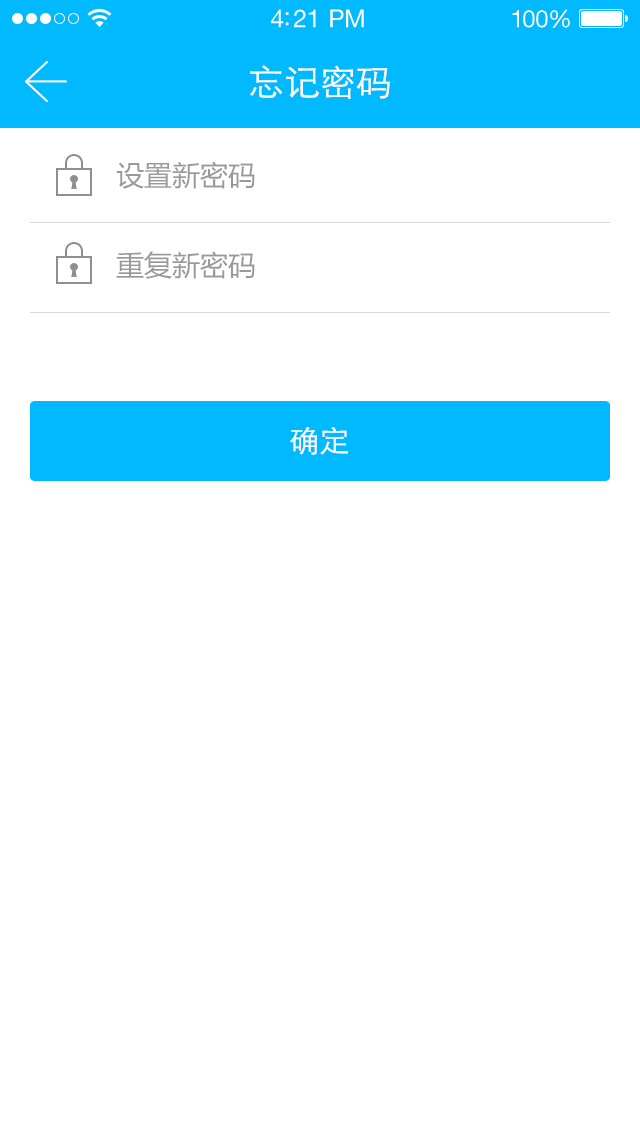
<style>
.page{position:relative;width:640px;height:1136px;background:#ffffff}
.page>*{position:absolute;margin:0}
.t1{font:25px "HelveticaNeueLTStd-Roman";letter-spacing:-0.02em;color:#ffffff}
.t2{font:24px "HelveticaNeueLTStd-Roman";letter-spacing:-0.02em;color:#ffffff}
.t3{font:36px "STXihei";color:#ffffff;text-transform:uppercase}
.t4{font:28px "MicrosoftYaHei";color:#999999}
.t5{font:30px "STXihei";color:#ffffff}
</style>
<div class="page">
<p class="t1" style="left:271px;top:9px;width:93px;height:19px">4:21 PM</p>
<p class="t2" style="left:512px;top:9px;width:58px;height:19px">100%</p>
<p class="t3" style="left:250px;top:65px;width:140px;height:34px">忘记密码</p>
<p class="t4" style="left:116px;top:161px;width:139px;height:28px">设置新密码</p>
<p class="t4" style="left:116px;top:251px;width:139px;height:28px">重复新密码</p>
<p class="t5" style="left:290px;top:426px;width:59px;height:29px">确定</p>
</div>
